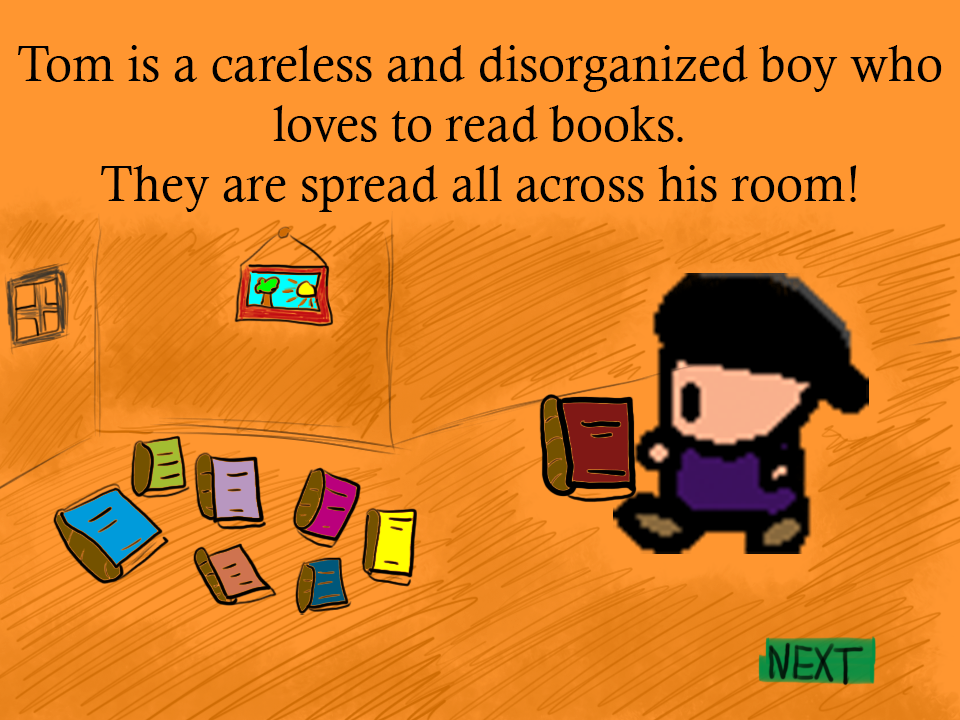
<style>
.page{position:relative;width:960px;height:720px;background:#ff9630}
.page>*{position:absolute;margin:0}
.t1{font:50px "CalistoMT";color:#000000}
</style>
<div class="page">
<p class="t1" style="left:18px;top:45px;width:924px;height:167px;text-align:center">Tom is a careless and disorganized boy who loves to read books.<br>They are spread all across his room!</p>
</div>
